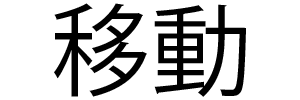
<style>
.page{position:relative;width:300px;height:100px;background:#ffffff}
.page>*{position:absolute;margin:0}
.t1{font:100px "KozGoPr6N-Regular";color:#000000}
</style>
<div class="page">
<p class="t1" style="left:54px;top:3px;width:192px;height:94px">移動</p>
</div>
